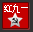
<style>
.page{position:relative;width:33px;height:32px;background:#c50000}
.page>*{position:absolute;margin:0}
.t1{font:10.4px "SimSun";letter-spacing:-0.25em;color:#ffffff}
</style>
<div class="page">
<p class="t1" style="left:4px;top:4px;width:24px;height:9px">红九一</p>
</div>
